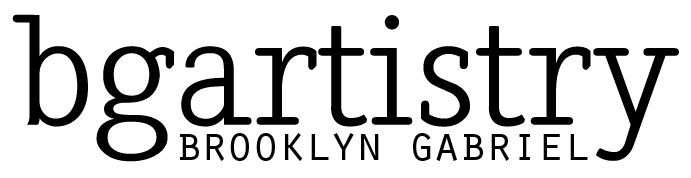
<style>
.page{position:relative;width:691px;height:178px;background:#ffffff}
.page>*{position:absolute;margin:0}
.t1{font:150px "NadiaSerifNormal";color:#000000}
.t2{font:12px "OratorStd";letter-spacing:-0.077em;color:#000000}
</style>
<div class="page">
<p class="t1" style="left:12px;top:14px;width:667px;height:148px">bgartistry</p>
<p class="t2" style="left:180px;top:133px;width:408px;height:28px">brooklyn gabriel</p>
</div>
